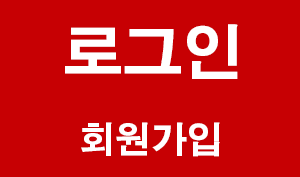
<style>
.page{position:relative;width:300px;height:177px;background:#c70003}
.page>*{position:absolute;margin:0}
.t1{font:60px "AdobeGothicStd-Bold";color:#ffffff}
.t2{font:36px "AdobeGothicStd-Bold";color:#ffffff}
</style>
<div class="page">
<p class="t1" style="left:65px;top:24px;width:173px;height:55px">로그인</p>
<p class="t2" style="left:81px;top:122px;width:139px;height:35px">회원가입</p>
</div>
